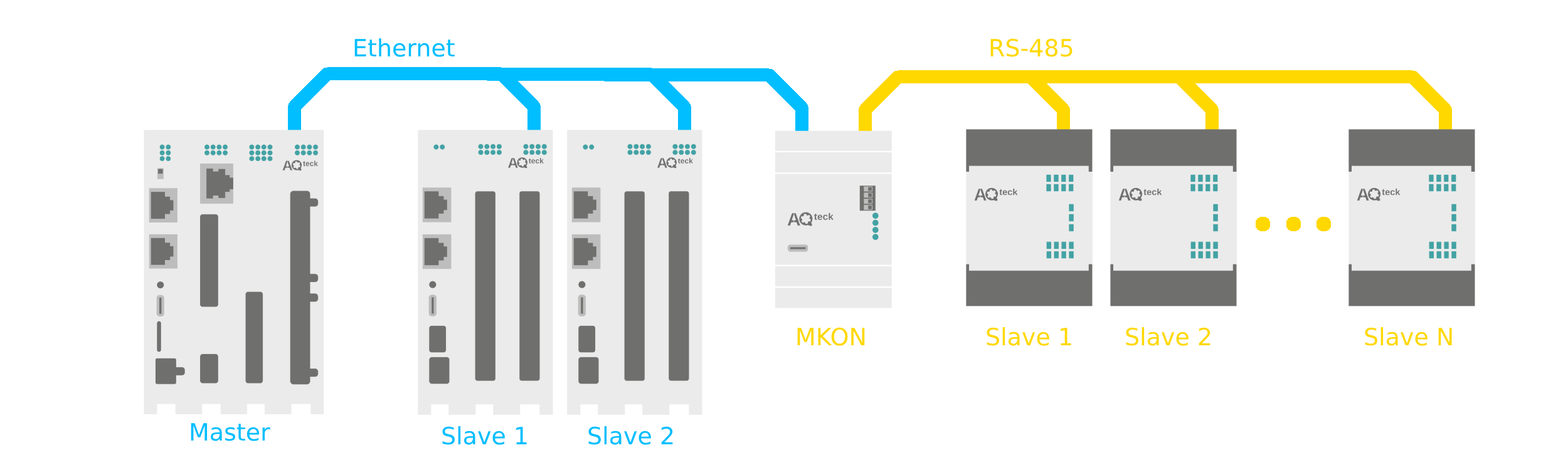
<style>
.page{position:relative;width:1568px;height:470px;background:#ffffff}
.page>*{position:absolute;margin:0}
.t1{font:23.8px "DejaVuSans";color:#00beff}
.t2{font:23.8px "DejaVuSans";color:#ffd800}
</style>
<div class="page">
<p class="t1" style="left:354px;top:38px;width:101px;height:19px"><span class="t2">E</span>thernet</p>
<p class="t2" style="left:990px;top:38px;width:83px;height:19px">RS-485</p>
<p class="t2" style="left:797px;top:327px;width:68px;height:19px">MKON</p>
<p class="t2" style="left:987px;top:327px;width:84px;height:19px">Slave 1</p>
<p class="t2" style="left:1126px;top:327px;width:84px;height:19px">Slave 2</p>
<p class="t2" style="left:1365px;top:327px;width:87px;height:19px">Slave N</p>
<p class="t1" style="left:191px;top:423px;width:79px;height:19px">Master</p>
<p class="t1" style="left:442px;top:426px;width:85px;height:19px">Slave 1</p>
<p class="t1" style="left:588px;top:426px;width:85px;height:19px">Slave 2</p>
</div>
